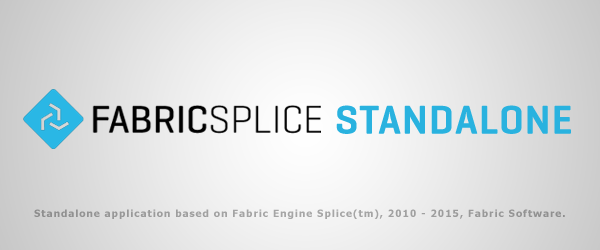
<style>
.page{position:relative;width:600px;height:250px}
.page>*{position:absolute;margin:0}
.t1{font:41.1px "Geogrotesque-SemiBold";letter-spacing:0.025em;color:#29b2df}
.t2{font:10px "Tahoma-Bold";letter-spacing:0.1em;color:#9d9d9d}
</style>
<div class="page">
<p class="t1" style="left:336px;top:105px;width:235px;height:29px">STANDALONE</p>
<p class="t2" style="left:34px;top:209px;width:531px;height:10px">Standalone application based on Fabric Engine Splice(tm), 2010 - 2015, Fabric Software.</p>
</div>
